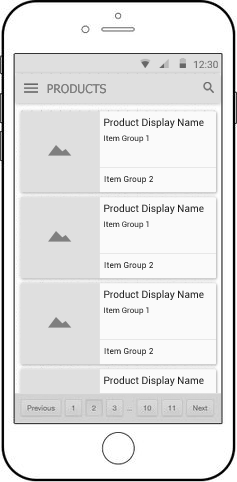
<style>
.page{position:relative;width:237px;height:482px;background:#dfdfdf}
.page>*{position:absolute;margin:0}
.t1{font:12px "Tahoma";color:#7f7f7f}
.t2{font:9.9px/14.3px "Roboto-Regular";letter-spacing:0.005em;color:#202020}
.t3{font:7.9px/14.3px "Roboto-Regular";letter-spacing:0.005em;color:#202020}
.t4{font:8.3px "Roboto-Regular";letter-spacing:0.01em}
</style>
<div class="page">
<p class="t1" style="left:47px;top:84px;width:59px;height:10px">PRODUCTS</p>
<p class="t2" style="left:104px;top:118px;width:100px;height:25px">Product Display Name<br><span class="t3">Item Group 1</span></p>
<p class="t4" style="left:104px;top:176px;width:49px;height:8px">Item Group 2</p>
<p class="t2" style="left:104px;top:204px;width:100px;height:25px">Product Display Name<br><span class="t3">Item Group 1</span></p>
<p class="t4" style="left:104px;top:262px;width:49px;height:8px">Item Group 2</p>
<p class="t2" style="left:104px;top:290px;width:100px;height:25px">Product Display Name<br><span class="t3">Item Group 1</span></p>
<p class="t4" style="left:104px;top:348px;width:49px;height:8px">Item Group 2</p>
</div>
